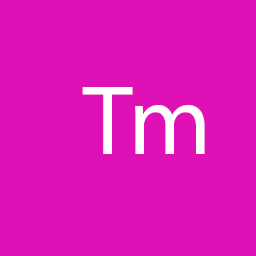
<style>
.page{position:relative;width:256px;height:256px;background:#df10b6}
.page>*{position:absolute;margin:0}
.t1{font:100px "MyriadPro-Regular";color:#ffffff}
</style>
<div class="page">
<p class="t1" style="left:82px;top:87px;width:123px;height:67px">Tm</p>
</div>
